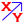
<style>
.page{position:relative;width:24px;height:24px;background:#ffffff}
.page>*{position:absolute;margin:0}
.t1{font:14px "CopperplateGothic-Bold";color:#ff0000}
</style>
<div class="page">
<p class="t1" style="left:1px;top:2px;width:11px;height:9px">X</p>
<p class="t1" style="left:12px;top:13px;width:11px;height:9px">Y</p>
</div>
